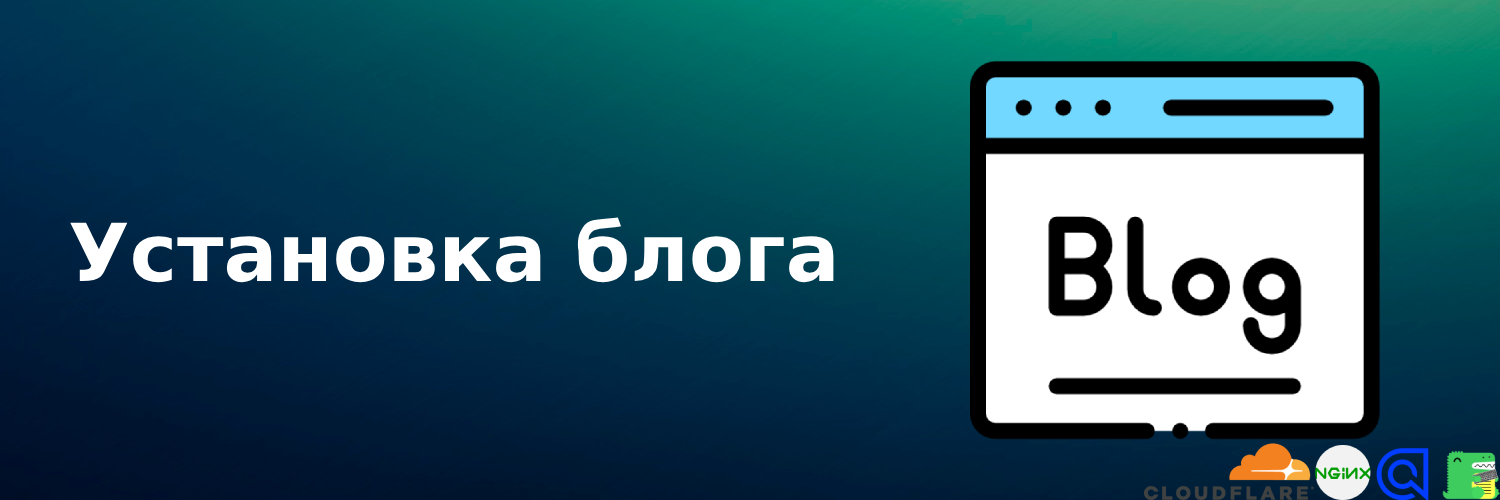
<style>
.page{position:relative;width:1500px;height:500px}
.page>*{position:absolute;margin:0}
.t1{font:80px "MontserratRoman-Bold";color:#ffffff}
</style>
<div class="page">
<p class="t1" style="left:70px;top:217px;width:764px;height:66px">Установка блога</p>
</div>
